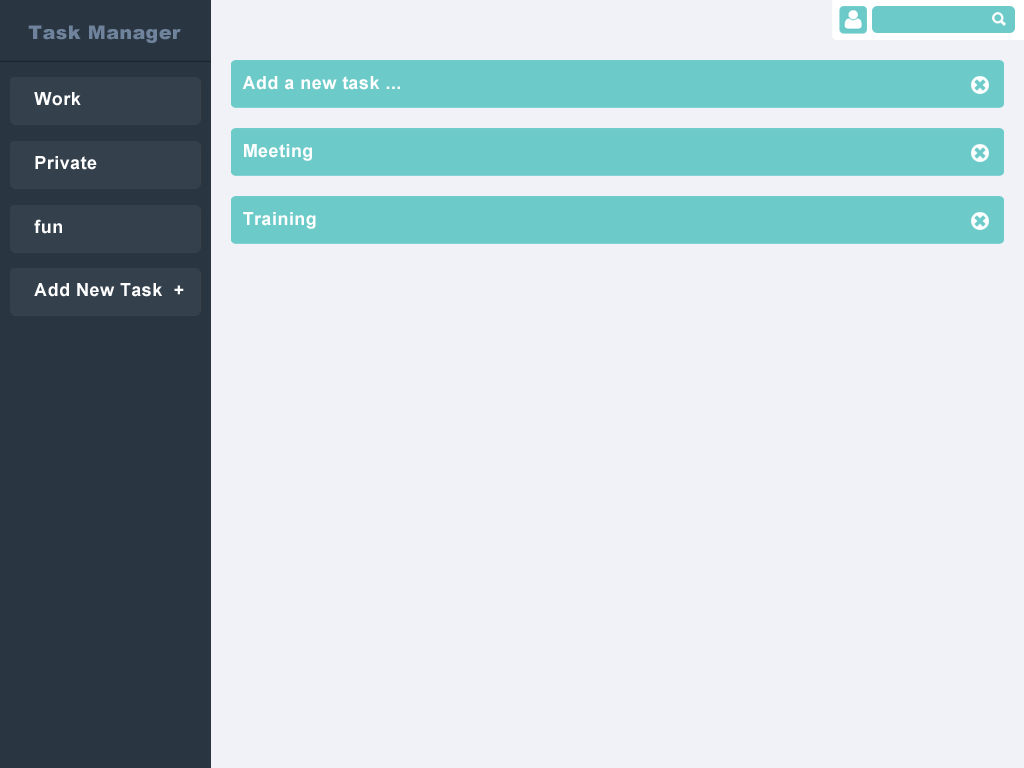
<style>
.page{position:relative;width:1024px;height:768px;background:#f1f2f7}
.page>*{position:absolute;margin:0}
.t1{font:19px "Arial-Black";letter-spacing:0.025em;color:#6f839c}
.t2{font:18px "Arial-BoldMT";letter-spacing:0.025em;color:#ffffff}
</style>
<div class="page">
<p class="t1" style="left:28px;top:25px;width:153px;height:18px">Task Manager</p>
<p class="t2" style="left:242px;top:76px;width:158px;height:14px">Add a new task ...</p>
<p class="t2" style="left:34px;top:92px;width:47px;height:14px">Work</p>
<p class="t2" style="left:244px;top:144px;width:68px;height:17px">Meeting</p>
<p class="t2" style="left:35px;top:156px;width:62px;height:14px">Private</p>
<p class="t2" style="left:34px;top:219px;width:28px;height:15px">fun</p>
<p class="t2" style="left:243px;top:212px;width:73px;height:17px">Training</p>
<p class="t2" style="left:34px;top:283px;width:150px;height:14px">Add New Task  +</p>
</div>
